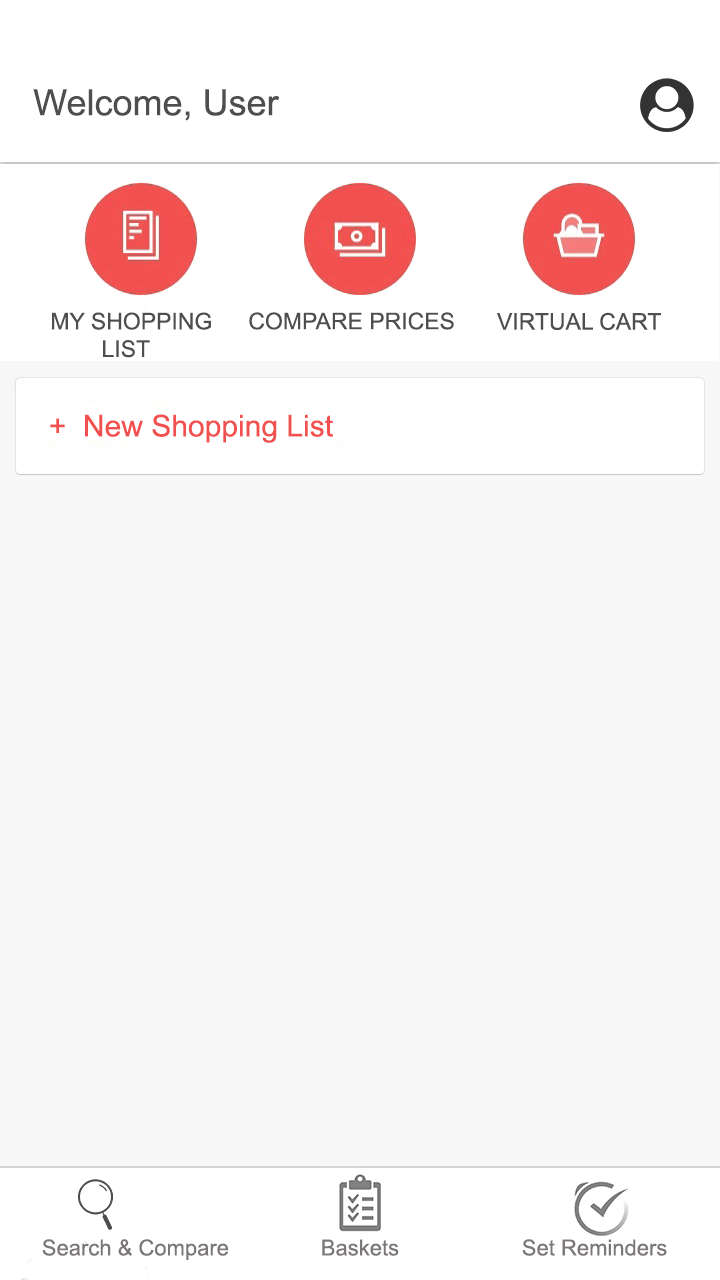
<style>
.page{position:relative;width:720px;height:1280px;background:#f7f7f7}
.page>*{position:absolute;margin:0}
.t1{font:36px "ArialMT";color:#4e4e4e}
.t2{font:23px "ArialMT";color:#4e4e4e}
.t3{font:30px "ArialMT";color:#f24f4f}
.t4{font:22px "ArialMT";color:#7c7777}
</style>
<div class="page">
<p class="t1" style="left:33px;top:89px;width:247px;height:32px">Welcome, User</p>
<p class="t2" style="left:52px;top:312px;width:159px;height:46px;text-align:right">MY SHOPPING<br>        LIST</p>
<p class="t2" style="left:249px;top:312px;width:205px;height:18px">COMPARE PRICES</p>
<p class="t2" style="left:497px;top:312px;width:164px;height:18px">VIRTUAL CART</p>
<p class="t3" style="left:50px;top:414px;width:283px;height:29px">+  New Shopping List</p>
<p class="t4" style="left:42px;top:1239px;width:187px;height:21px">Search &amp; Compare</p>
<p class="t4" style="left:322px;top:1239px;width:77px;height:17px">Baskets</p>
<p class="t4" style="left:522px;top:1239px;width:145px;height:17px">Set Reminders</p>
</div>
